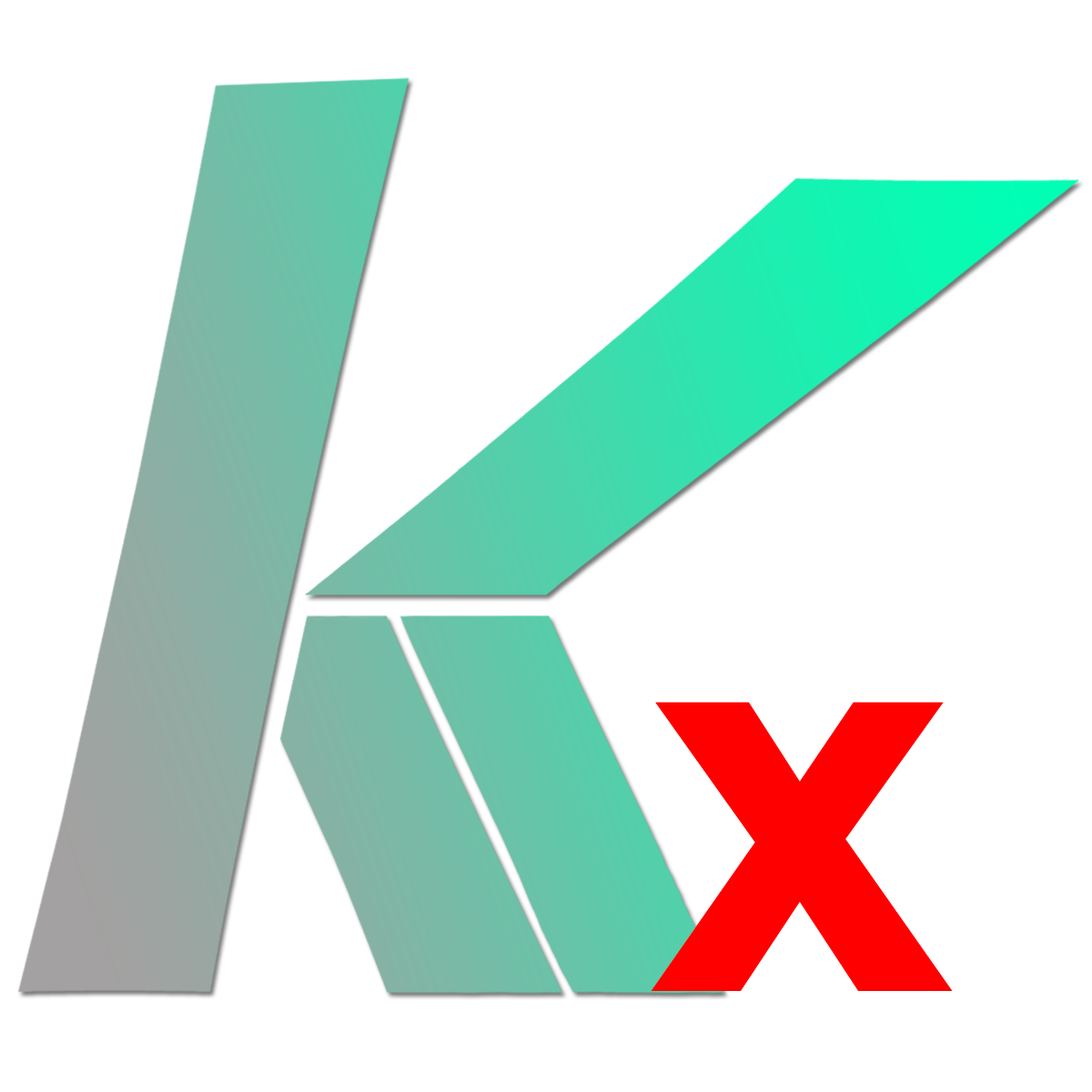
<style>
.page{position:relative;width:1092px;height:1092px;background:#ffffff}
.page>*{position:absolute;margin:0}
.t1{font:133.6px/834.9px "Arial-BoldMT";color:#ff0000}
</style>
<div class="page">
<p class="t1" style="left:651px;top:702px;width:302px;height:289px">x</p>
</div>
